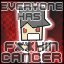
<style>
.page{position:relative;width:64px;height:64px}
.page>*{position:absolute;margin:0}
.t1{font:9px "M41_LOVEBIT"}
.t2{font:7px "M41_LOVEBIT"}
</style>
<div class="page">
<p class="t1" style="left:0px;top:3px;width:63px;height:59px;text-align:center"><span class="t2">EVERYONE<br>HAS <br><br></span><br>F**KIN<br>CANCER</p>
</div>
